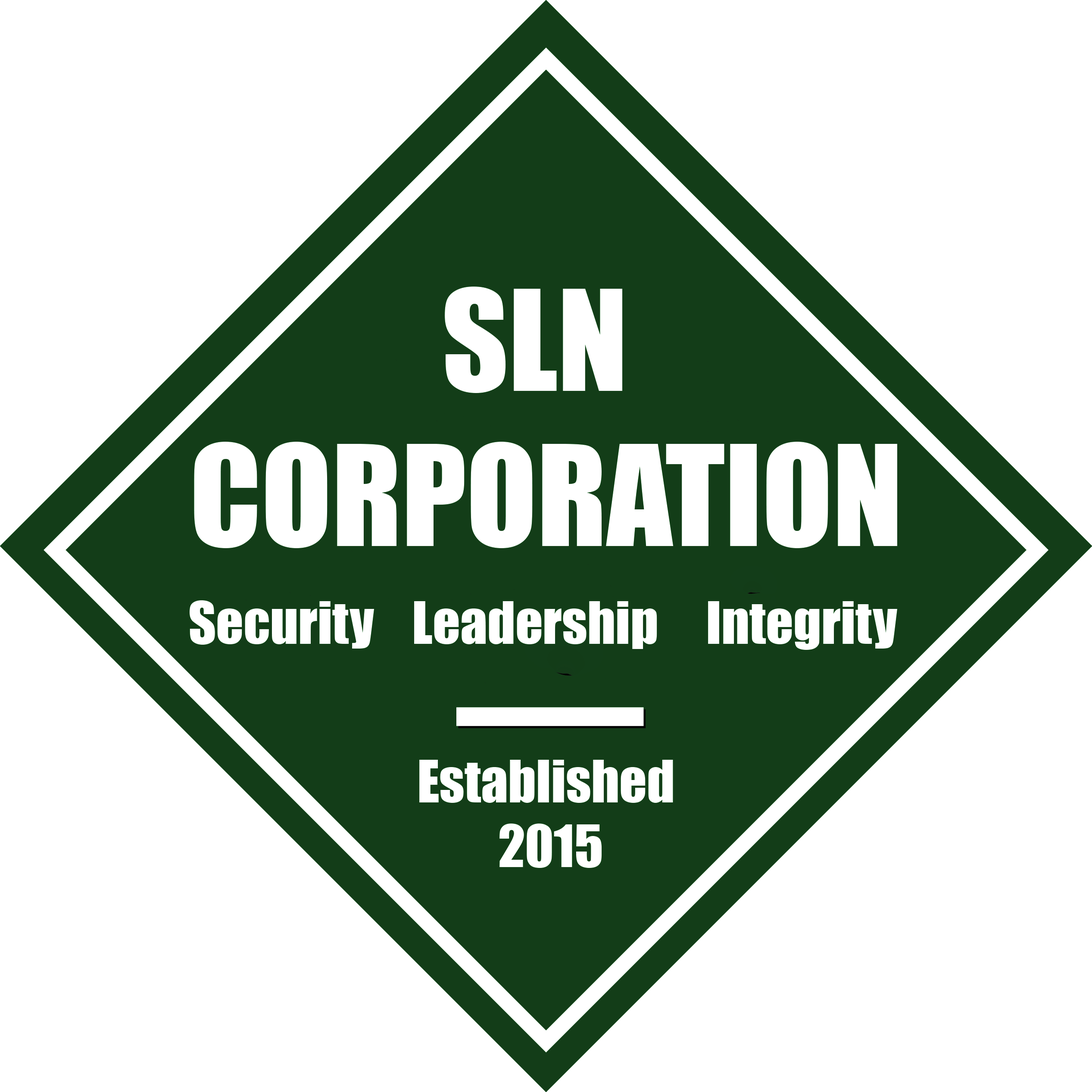
<style>
.page{position:relative;width:1092px;height:1092px;background:#ffffff}
.page>*{position:absolute;margin:0}
.t1{font:129.3px "Impact";color:#ffffff}
.t2{font:53.9px "Impact";color:#ffffff}
</style>
<div class="page">
<p class="t1" style="left:194px;top:287px;width:703px;height:261px;text-align:center">SLN<br> CORPORATION</p>
<p class="t2" style="left:189px;top:600px;width:709px;height:50px">Security    Leadership     Integrity</p>
<p class="t2" style="left:419px;top:760px;width:254px;height:108px;text-align:center">Established <br>2015</p>
</div>
